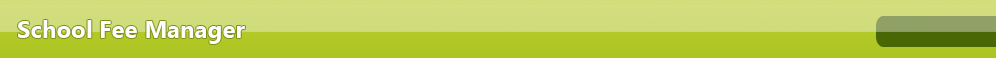
<style>
.page{position:relative;width:996px;height:58px}
.page>*{position:absolute;margin:0}
.t1{font:24px "SegoeUI-Bold";color:#fefefe}
</style>
<div class="page">
<p class="t1" style="left:18px;top:20px;width:227px;height:24px">School Fee Manager</p>
</div>
